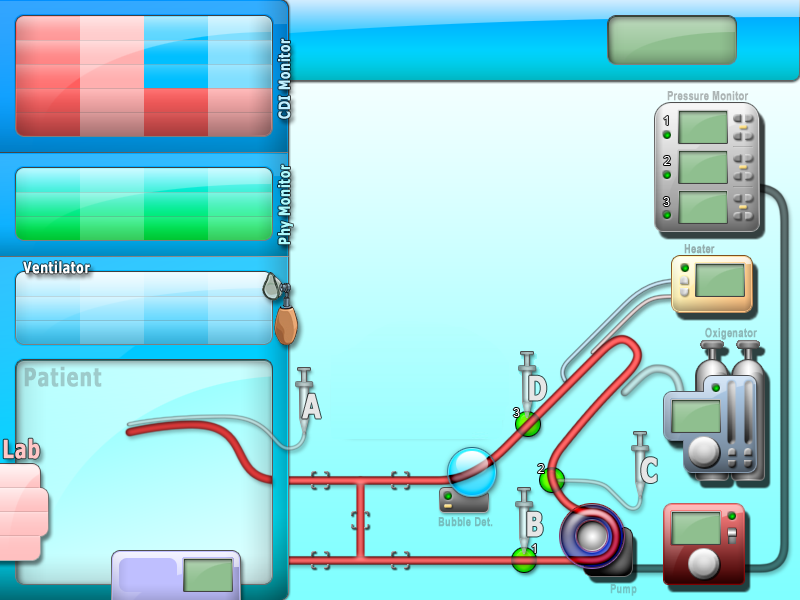
<style>
.page{position:relative;width:800px;height:600px}
.page>*{position:absolute;margin:0}
.t1{font:15.4px "Verdana-Bold";letter-spacing:0.025em;color:#c0efff;font-weight:bold;scale:0.71 1}
.t2{font:12.6px "Arial-BoldMT";letter-spacing:0.025em;color:#acb5b5;font-weight:bold;scale:0.71 1}
.t3{font:15.4px "Verdana-Bold";letter-spacing:0.025em;color:#aff9fb;font-weight:bold;scale:0.71 1}
.t4{font:12.6px "Arial-BoldMT";letter-spacing:0.025em;color:#94aeae;font-weight:bold;scale:0.71 1}
.t5{font:15.4px "Verdana-Bold";letter-spacing:0.025em;color:#ffffff;font-weight:bold;scale:0.71 1}
.t6{font:12.6px "Arial-BoldMT";letter-spacing:0.025em;color:#8eb8b8;font-weight:bold;scale:0.71 1}
.t7{font:25.2px "Verdana-Bold";letter-spacing:0.025em;color:#9dcbcb;font-weight:bold;scale:0.71 1}
.t8{font:33.6px "Verdana-Bold";letter-spacing:0.025em;color:#e6e6e6;font-weight:bold;scale:0.71 1}
.t9{font:25.2px "Verdana-Bold";letter-spacing:0.025em;color:#ffc6c6;font-weight:bold;scale:0.71 1}
.t10{font:12.6px "Arial-BoldMT";letter-spacing:0.025em;color:#76bdbd;font-weight:bold;scale:0.71 1}
.t11{font:12.6px "Arial-BoldMT";letter-spacing:0.025em;color:#72c5c5;font-weight:bold;scale:0.71 1}
</style>
<div class="page">
<p class="t1" style="left:278px;top:38px;width:13px;height:81px;rotate:-90deg">CDI Monitor</p>
<p class="t2" style="left:667px;top:91px;width:82px;height:10px">Pressure Monitor</p>
<p class="t3" style="left:278px;top:164px;width:15px;height:81px;rotate:-90deg">Phy Monitor</p>
<p class="t4" style="left:684px;top:244px;width:31px;height:10px">Heater</p>
<p class="t5" style="left:23px;top:261px;width:67px;height:13px">Ventilator</p>
<p class="t6" style="left:705px;top:327px;width:52px;height:13px">Oxigenator</p>
<p class="t7" style="left:24px;top:366px;width:78px;height:21px">Patient</p>
<p class="t8" style="left:529px;top:375px;width:18px;height:26px">D</p>
<p class="t8" style="left:302px;top:393px;width:19px;height:26px">A</p>
<p class="t9" style="left:3px;top:438px;width:37px;height:21px">Lab</p>
<p class="t8" style="left:641px;top:457px;width:16px;height:26px">C</p>
<p class="t10" style="left:438px;top:517px;width:55px;height:10px">Bubble Det.</p>
<p class="t8" style="left:527px;top:511px;width:16px;height:26px">B</p>
<p class="t11" style="left:610px;top:584px;width:27px;height:12px">Pump</p>
</div>
